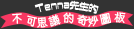
<style>
.page{position:relative;width:134px;height:29px;background:#333333}
.page>*{position:absolute;margin:0}
.t1{font:10.8px "TA-shiguma";color:#ffffff;scale:0.83 1}
.t2{font:9px "TA-shiguma";color:#ffffff}
.t3{font:11px "NewCinemaBCN-D";letter-spacing:0.15em;color:#ffffff}
</style>
<div class="page">
<p class="t1" style="left:34px;top:0px;width:65px;height:14px">Tenna<span class="t2">先生的</span></p>
<p class="t3" style="left:12px;top:12px;width:114px;height:16px">不可思議的奇妙圖板</p>
</div>
